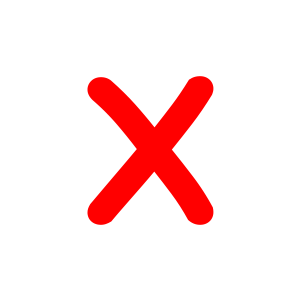
<style>
.page{position:relative;width:300px;height:300px;background:#ffffff}
.page>*{position:absolute;margin:0}
.t1{font:206.2px "ChalkboardSE-Regular";color:#ff0000;font-weight:bold}
</style>
<div class="page">
<p class="t1" style="left:87px;top:76px;width:127px;height:149px">X</p>
</div>
